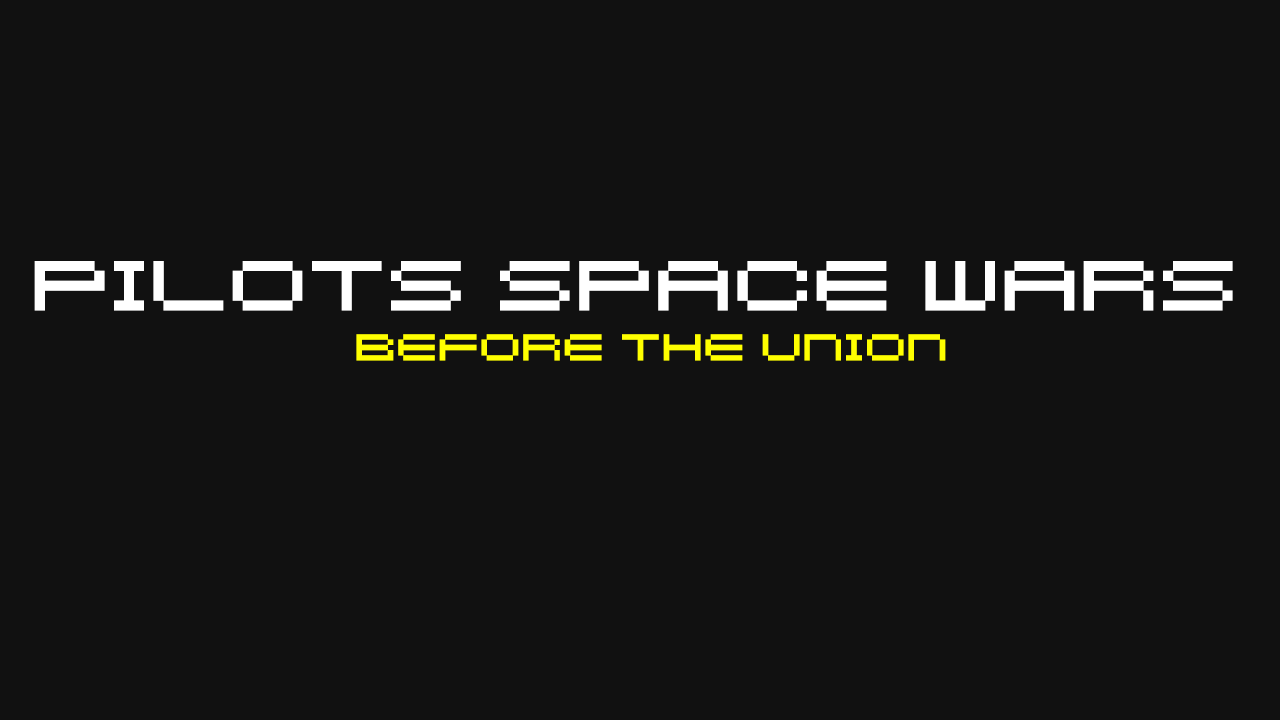
<style>
.page{position:relative;width:1280px;height:720px;background:#111111}
.page>*{position:absolute;margin:0}
.t1{font:79.2px "Kenney-Rocket";color:#ffffff}
.t2{font:41.7px "Kenney-Rocket";color:#ffff00}
</style>
<div class="page">
<p class="t1" style="left:34px;top:261px;width:1199px;height:100px;text-align:center">pilots space wars <br><span class="t2">before the union</span></p>
</div>
